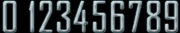
<style>
.page{position:relative;width:180px;height:33px;background:#000000}
.page>*{position:absolute;margin:0}
.t1{font:40px "AgencyFB-Reg";color:#b2bbc0}
</style>
<div class="page">
<p class="t1" style="left:3px;top:1px;width:175px;height:31px">0123456789</p>
</div>
